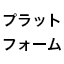
<style>
.page{position:relative;width:64px;height:64px;background:#ffffff}
.page>*{position:absolute;margin:0}
.t1{font:15px/24px "HiraKakuPro-W6";color:#000000}
</style>
<div class="page">
<p class="t1" style="left:3px;top:13px;width:58px;height:38px">プラット<br>フォーム</p>
</div>
